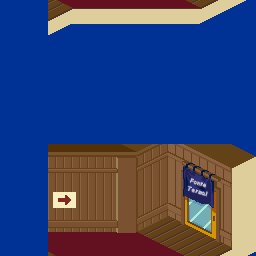
<style>
.page{position:relative;width:256px;height:256px;background:#003194}
.page>*{position:absolute;margin:0}
.t1{font:7.1px "ZeldaDXTTBRK";letter-spacing:-0.18em;color:#c6c6c6;font-weight:bold;scale:0.9 1}
.t2{font:7.1px "ZeldaDXTTBRK";letter-spacing:-0.26em;color:#c6c6c6;font-weight:bold;scale:0.9 1}
.t3{font:7.1px "ZeldaDXTTBRK";letter-spacing:-0.24em;color:#c6c6c6;font-weight:bold;scale:0.9 1}
.t4{font:7.1px "ZeldaDXTTBRK";letter-spacing:-0.3em;color:#c6c6c6;font-weight:bold;scale:0.9 1}
</style>
<div class="page">
<p class="t1" style="left:188px;top:178px;width:20px;height:19px;text-align:center;rotate:17deg">Fo<span class="t2">n</span><span class="t3">t</span>e<br>Terma<span class="t4">l</span></p>
</div>
